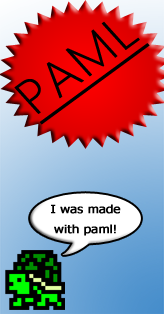
<style>
.page{position:relative;width:164px;height:314px}
.page>*{position:absolute;margin:0}
.t1{font:50.8px "SegoeUI-Light";color:#000000;font-weight:bold;text-decoration:underline}
.t2{font:11.4px/19.9px "Tahoma";color:#000000;font-weight:bold;scale:1.13 1}
</style>
<div class="page">
<p class="t1" style="left:14px;top:21px;width:136px;height:104px;rotate:-36deg">PAML</p>
<p class="t2" style="left:51px;top:204px;width:70px;height:32px;text-align:center">I was made<br>with paml!</p>
</div>
